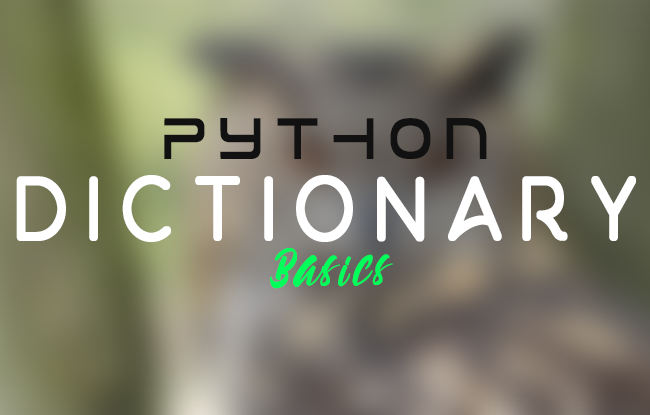
<style>
.page{position:relative;width:650px;height:415px}
.page>*{position:absolute;margin:0}
.t1{font:51.9px "Tele-Marines";letter-spacing:0.28em;color:#111111;font-weight:bold;scale:0.83 1}
.t2{font:81px "Aquatico-Regular";letter-spacing:0.2em;color:#ffffff;font-weight:bold;scale:0.83 1}
.t3{font:36.7px "VatticanRegular";letter-spacing:0.14em;color:#00ff5a;font-weight:bold;scale:0.77 1}
</style>
<div class="page">
<p class="t1" style="left:164px;top:118px;width:323px;height:41px">python</p>
<p class="t2" style="left:16px;top:175px;width:620px;height:67px">dictionary</p>
<p class="t3" style="left:270px;top:248px;width:123px;height:41px;rotate:-2deg">Basics</p>
</div>
